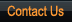
<style>
.page{position:relative;width:72px;height:22px}
.page>*{position:absolute;margin:0}
.t1{font:14px "ArialNarrow";color:#ff9933}
</style>
<div class="page">
<p class="t1" style="left:7px;top:5px;width:57px;height:12px">Contact Us</p>
</div>
